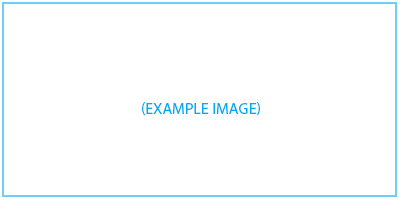
<style>
.page{position:relative;width:400px;height:200px;background:#ffffff}
.page>*{position:absolute;margin:0}
.t1{font:16px "MyriadPro-Regular";color:#00aaef;text-transform:uppercase}
</style>
<div class="page">
<p class="t1" style="left:142px;top:102px;width:118px;height:14px">(example image)</p>
</div>
